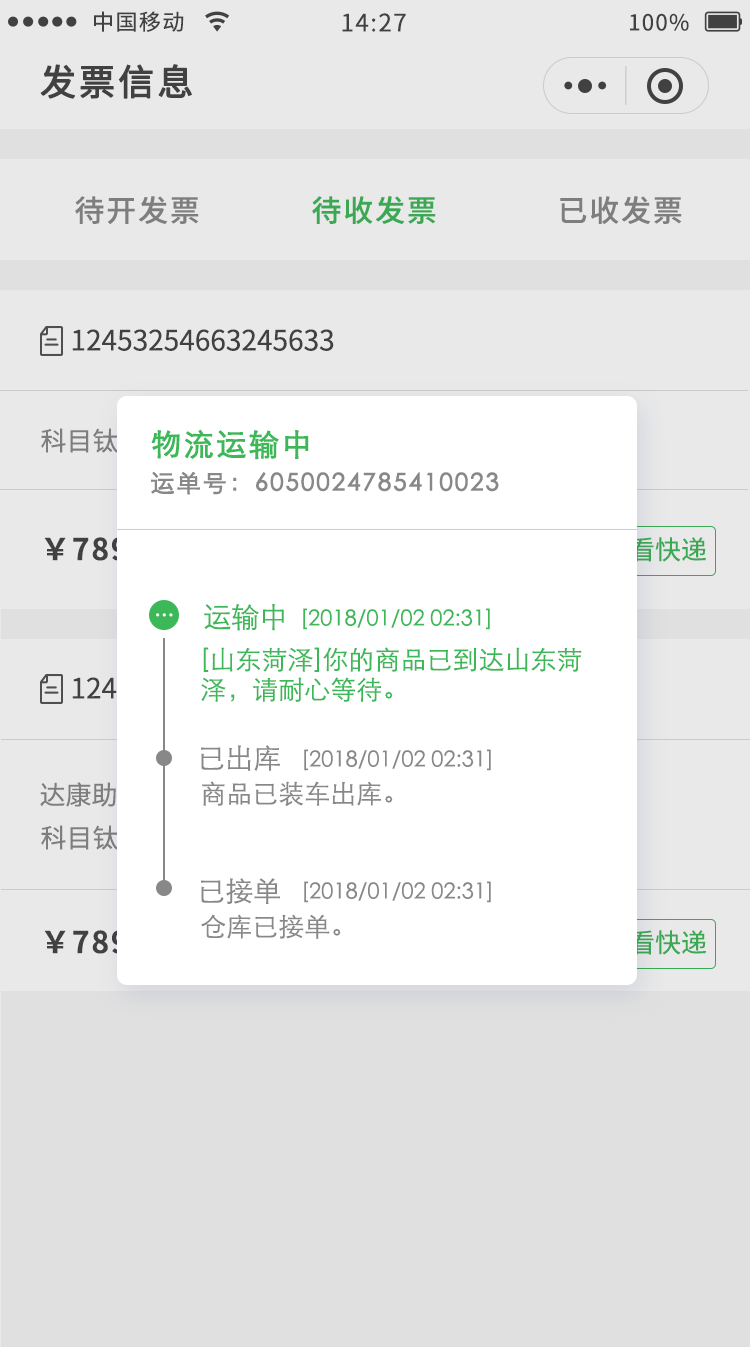
<style>
.page{position:relative;width:750px;height:1347px;background:#e0e0e0}
.page>*{position:absolute;margin:0}
.t1{font:22px "NotoSansCJKsc-Regular";letter-spacing:0.06em;color:#444444}
.t2{font:24px "NotoSansCJKsc-Regular";letter-spacing:0.06em;color:#444444}
.t3{font:36px "NotoSansCJKsc-Regular";letter-spacing:0.06em;color:#444444;font-weight:bold}
.t4{font:30px "NotoSansCJKsc-Medium";letter-spacing:0.06em;color:#888888}
.t5{font:30px "NotoSansCJKsc-Medium";letter-spacing:0.06em;color:#3db858}
.t6{font:28px "NotoSansCJKsc-Regular";color:#444444}
.t7{font:30px "STXihei";letter-spacing:0.06em;color:#3db858;font-weight:bold}
.t8{font:24px "STXihei";letter-spacing:0.06em;color:#888888;font-weight:bold}
.t9{font:30px "NotoSansCJKsc-Bold";letter-spacing:0.06em;color:#ffffff}
.t10{font:26px "NotoSansCJKsc-Regular";color:#3db858}
.t11{font:28px "STXihei";color:#3db858}
.t12{font:24px "STXihei";color:#ffffff}
.t13{font:22px "STXihei";color:#3db858}
.t14{font:26px/30px "STXihei";color:#3db858}
.t15{font:28px "STXihei";color:#888888}
.t16{font:22px "STXihei";color:#888888}
.t17{font:26px "STXihei";color:#888888}
.t18{font:26px "NotoSansCJKsc-Regular";color:#ffffff}
.t19{font:30px "NotoSansCJKsc-Bold";letter-spacing:0.06em}
</style>
<div class="page">
<p class="t1" style="left:94px;top:11px;width:90px;height:21px">中国移动</p>
<p class="t2" style="left:342px;top:13px;width:64px;height:19px">14:27</p>
<p class="t1" style="left:630px;top:13px;width:59px;height:18px">100%</p>
<p class="t3" style="left:40px;top:64px;width:152px;height:35px">发票信息</p>
<p class="t4" style="left:75px;top:196px;width:124px;height:28px">待开发票</p>
<p class="t5" style="left:312px;top:196px;width:124px;height:28px">待收发票</p>
<p class="t4" style="left:560px;top:196px;width:122px;height:28px">已收发票</p>
<p class="t6" style="left:72px;top:329px;width:262px;height:22px">12453254663245633</p>
<p class="t7" style="left:151px;top:429px;width:158px;height:31px">物流运输中</p>
<p class="t8" style="left:151px;top:471px;width:348px;height:24px">运单号：6050024785410023</p>
<p class="t9" style="left:44px;top:535px;width:231px;height:32px">￥789456(已开)</p>
<p class="t10" style="left:603px;top:537px;width:103px;height:25px">查看快递</p>
<p class="t11" style="left:204px;top:603px;width:80px;height:28px">运输中</p>
<p class="t12" style="left:156px;top:613px;width:17px;height:4px">...</p>
<p class="t13" style="left:303px;top:608px;width:187px;height:22px">[2018/01/02 02:31]</p>
<p class="t14" style="left:201px;top:647px;width:381px;height:55px">[山东菏泽]你的商品已到达山东菏<br>泽，请耐心等待。</p>
<p class="t15" style="left:201px;top:745px;width:79px;height:26px">已出库</p>
<p class="t16" style="left:304px;top:749px;width:187px;height:22px">[2018/01/02 02:31]</p>
<p class="t17" style="left:202px;top:781px;width:191px;height:25px">商品已装车出库。</p>
<p class="t18" style="left:41px;top:825px;width:422px;height:25px">科目钛白  钛白粉  TS-6200  x1  ￥690</p>
<p class="t15" style="left:201px;top:878px;width:79px;height:26px">已接单</p>
<p class="t16" style="left:304px;top:881px;width:187px;height:22px">[2018/01/02 02:31]</p>
<p class="t17" style="left:201px;top:914px;width:140px;height:25px">仓库已接单。</p>
<p class="t19" style="left:44px;top:928px;width:231px;height:32px">￥789456(已开)</p>
<p class="t10" style="left:603px;top:930px;width:103px;height:25px">查看快递</p>
</div>
